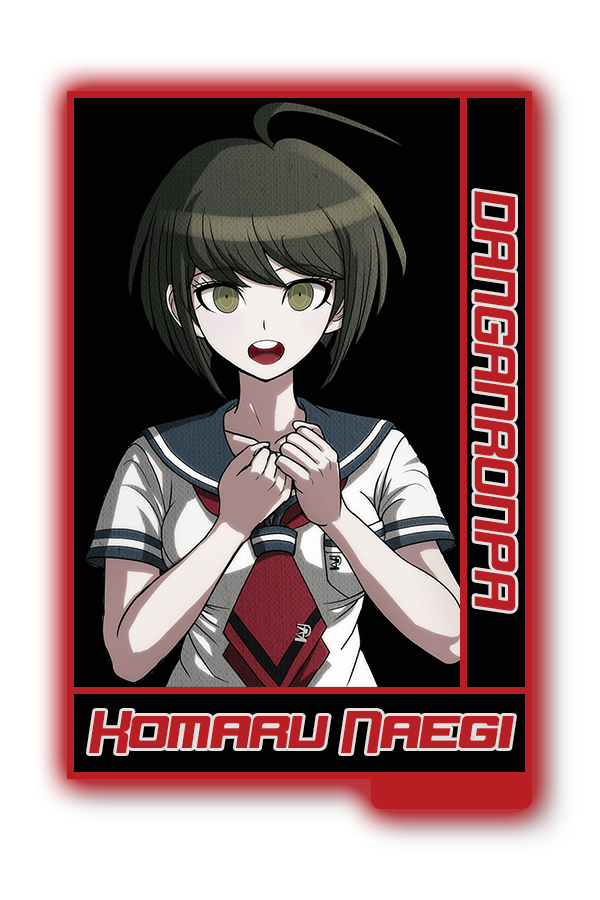
<style>
.page{position:relative;width:600px;height:900px;background:#020202}
.page>*{position:absolute;margin:0}
.t1{font:48.8px "DorBlue";color:#bb2c2e}
.t2{font:50.5px "DorBlue";color:#bb2c2e}
</style>
<div class="page">
<p class="t1" style="left:474px;top:191px;width:42px;height:420px;rotate:90deg">DANGANRONPA</p>
<p class="t2" style="left:89px;top:711px;width:425px;height:42px">Komaru Naegi</p>
</div>
